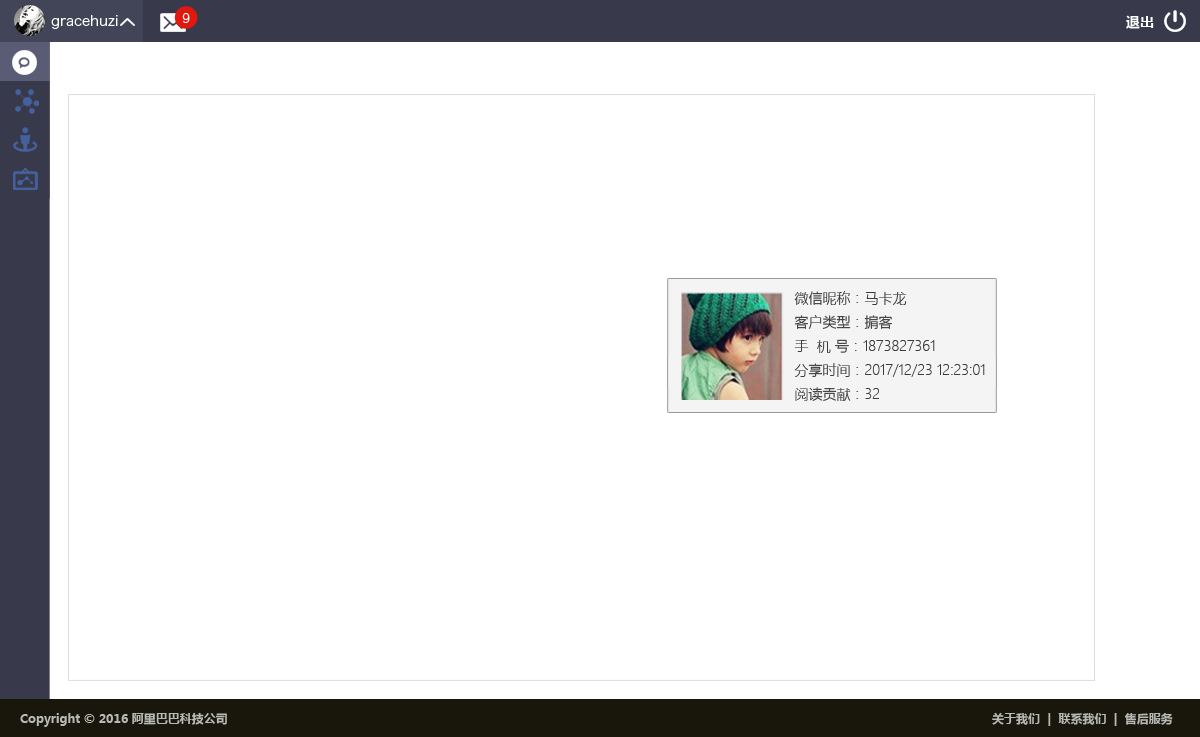
<style>
.page{position:relative;width:1200px;height:737px;background:#ffffff}
.page>*{position:absolute;margin:0}
.t1{font:14px "HiraginoSansGB-W3";color:#ffffff}
.t2{font:12px "HiraginoSansGB-W3";color:#ffffff}
.t3{font:14px "MicrosoftYaHei";color:#ffffff}
.t4{font:14px/24px "MicrosoftYaHeiLight";color:#3b3b3b}
.t5{font:12px "MicrosoftYaHei";color:#b6b9b5}
</style>
<div class="page">
<p class="t1" style="left:51px;top:15px;width:67px;height:14px">gracehuzi</p>
<p class="t2" style="left:182px;top:13px;width:8px;height:10px">9</p>
<p class="t3" style="left:1126px;top:15px;width:28px;height:14px">退出</p>
<p class="t4" style="left:794px;top:291px;width:191px;height:110px">微信昵称：马卡龙<br>客户类型：掮客<br>手  机 号：1873827361<br>分享时间：2017/12/23 12:23:01<br>阅读贡献：32</p>
<p class="t5" style="left:20px;top:712px;width:207px;height:15px">Copyright © 2016 阿里巴巴科技公司</p>
<p class="t5" style="left:992px;top:712px;width:181px;height:14px">关于我们  |  联系我们  |  售后服务</p>
</div>
